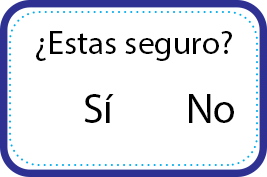
<style>
.page{position:relative;width:267px;height:177px;background:#ffffff}
.page>*{position:absolute;margin:0}
.t1{font:33.3px "MyriadPro-Regular";color:#000000}
.t2{font:41.7px "MyriadPro-Regular";color:#000000}
</style>
<div class="page">
<p class="t1" style="left:36px;top:31px;width:196px;height:30px">¿Estas seguro?</p>
<p class="t2" style="left:84px;top:94px;width:30px;height:29px">Sí</p>
<p class="t2" style="left:189px;top:94px;width:45px;height:29px">No</p>
</div>
